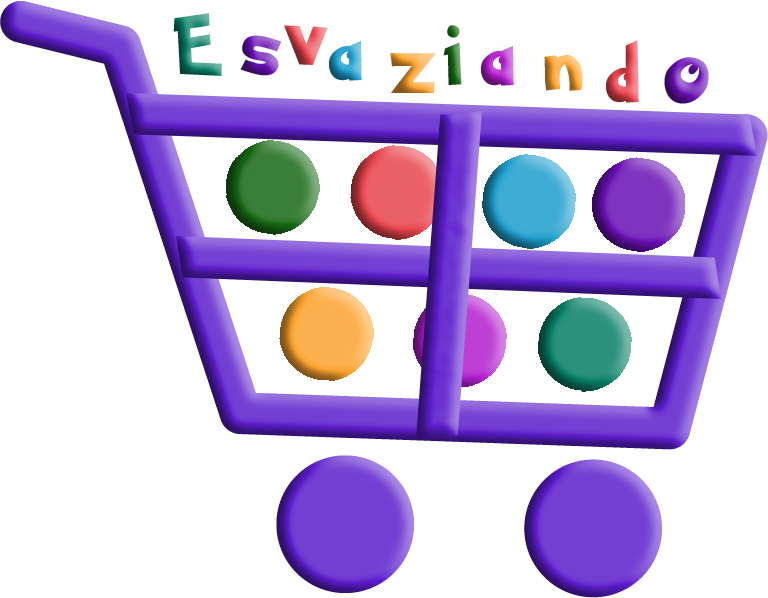
<style>
.page{position:relative;width:768px;height:598px;background:#ffffff}
.page>*{position:absolute;margin:0}
.t1{font:58.3px "PokemonSolidNormal";letter-spacing:0.2em}
.t2{font:78.7px "PokemonSolidNormal";letter-spacing:0.2em}
</style>
<div class="page">
<p class="t1" style="left:173px;top:13px;width:49px;height:63px">E</p>
<p class="t1" style="left:284px;top:25px;width:44px;height:40px">v</p>
<p class="t1" style="left:443px;top:25px;width:19px;height:60px">i</p>
<p class="t1" style="left:240px;top:35px;width:42px;height:41px">s</p>
<p class="t1" style="left:329px;top:40px;width:33px;height:41px">a</p>
<p class="t1" style="left:606px;top:40px;width:33px;height:63px">d</p>
<p class="t1" style="left:390px;top:53px;width:46px;height:40px">z</p>
<p class="t1" style="left:481px;top:45px;width:33px;height:41px">a</p>
<p class="t1" style="left:544px;top:55px;width:39px;height:36px">n</p>
<p class="t2" style="left:664px;top:57px;width:45px;height:47px">o</p>
</div>
